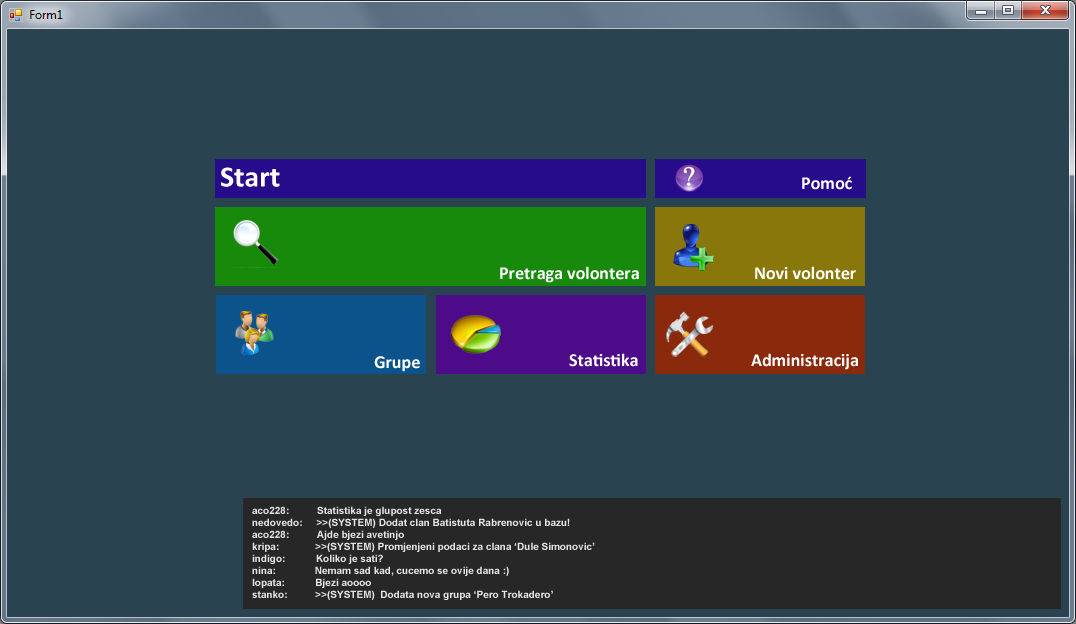
<style>
.page{position:relative;width:1076px;height:624px;background:#2a4351}
.page>*{position:absolute;margin:0}
.t1{font:29.9px "Calibri-Bold";color:#ffffff}
.t2{font:18px "Calibri-Bold";color:#ffffff}
.t3{font:10px "Arial-BoldMT";color:#e4e4e6}
</style>
<div class="page">
<p class="t1" style="left:221px;top:167px;width:59px;height:20px">Start</p>
<p class="t2" style="left:802px;top:176px;width:50px;height:14px">Pomoć</p>
<p class="t2" style="left:500px;top:266px;width:139px;height:17px">Pretraga volontera</p>
<p class="t2" style="left:755px;top:266px;width:101px;height:14px">Novi volonter</p>
<p class="t2" style="left:569px;top:353px;width:69px;height:14px">Statistika</p>
<p class="t2" style="left:751px;top:353px;width:107px;height:17px">Administracija</p>
<p class="t2" style="left:374px;top:356px;width:46px;height:16px">Grupe</p>
<p class="t3" style="left:252px;top:506px;width:343px;height:94px">aco228:          Statistika je glupost zesca<br>nedovedo:     &gt;&gt;(SYSTEM) Dodat clan Batistuta Rabrenovic u bazu!<br>aco228:          Ajde bjezi avetinjo<br>kripa:             &gt;&gt;(SYSTEM) Promjenjeni podaci za clana ‘Dule Simonovic’<br>indigo:           Koliko je sati?<br>nina:              Nemam sad kad, cucemo se ovije dana :)<br>lopata:           Bjezi aoooo<br>stanko:          &gt;&gt;(SYSTEM)  Dodata nova grupa ‘Pero Trokadero’</p>
</div>
